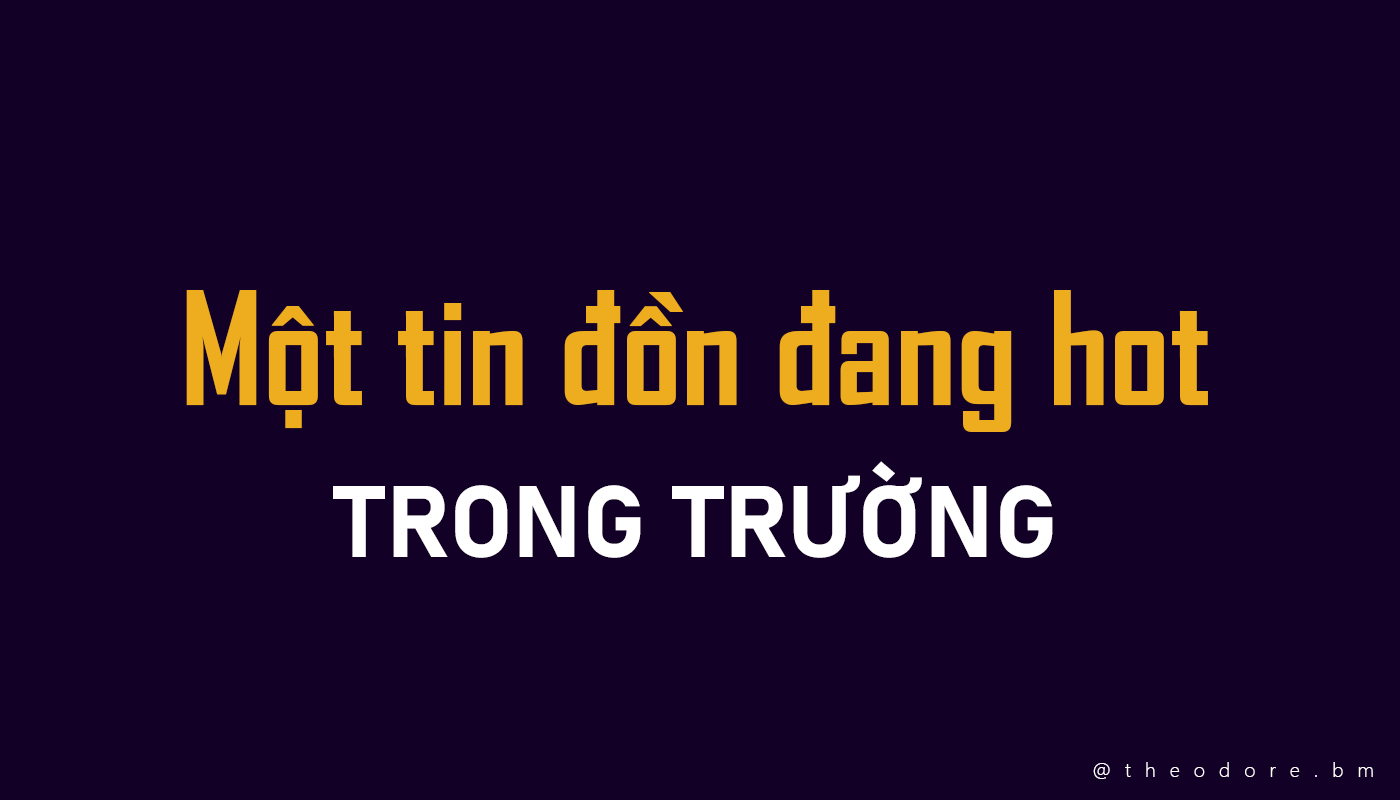
<style>
.page{position:relative;width:1400px;height:800px;background:#120026}
.page>*{position:absolute;margin:0}
.t1{font:150px "SVN-AgencyFBbold";color:#eead1f}
.t2{font:100px "Bahnschrift-Bold";color:#ffffff}
.t3{font:20px "SegoeUI-Light";letter-spacing:0.7em;color:#ffffff}
</style>
<div class="page">
<p class="t1" style="left:186px;top:290px;width:1022px;height:142px">Một tin đồn đang hot</p>
<p class="t2" style="left:333px;top:461px;width:720px;height:97px">TRONG TRƯỜNG</p>
<p class="t3" style="left:1093px;top:762px;width:280px;height:17px">@theodore.bm</p>
</div>
